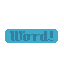
<style>
.page{position:relative;width:64px;height:64px;background:#ffffff}
.page>*{position:absolute;margin:0}
.t1{font:14px "Superscript";color:#3281a2}
</style>
<div class="page">
<p class="t1" style="left:10px;top:31px;width:43px;height:10px">Word!</p>
</div>
